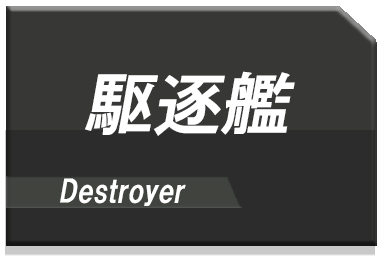
<style>
.page{position:relative;width:384px;height:256px;background:#373836}
.page>*{position:absolute;margin:0}
.t1{font:68px "HGPGothicE";color:#ffffff;font-style:italic}
.t2{font:30px "HGPSoeiKakugothicUB";color:#ffffff;font-style:italic}
</style>
<div class="page">
<p class="t1" style="left:85px;top:71px;width:210px;height:65px">駆逐艦</p>
<p class="t2" style="left:60px;top:178px;width:126px;height:28px">Destroyer</p>
</div>
